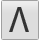
<style>
.page{position:relative;width:40px;height:40px;background:#dddddd}
.page>*{position:absolute;margin:0}
.t1{font:36px "MyriadPro-Regular";color:#333333}
</style>
<div class="page">
<p class="t1" style="left:9px;top:7px;width:20px;height:25px;rotate:180deg">V</p>
</div>
